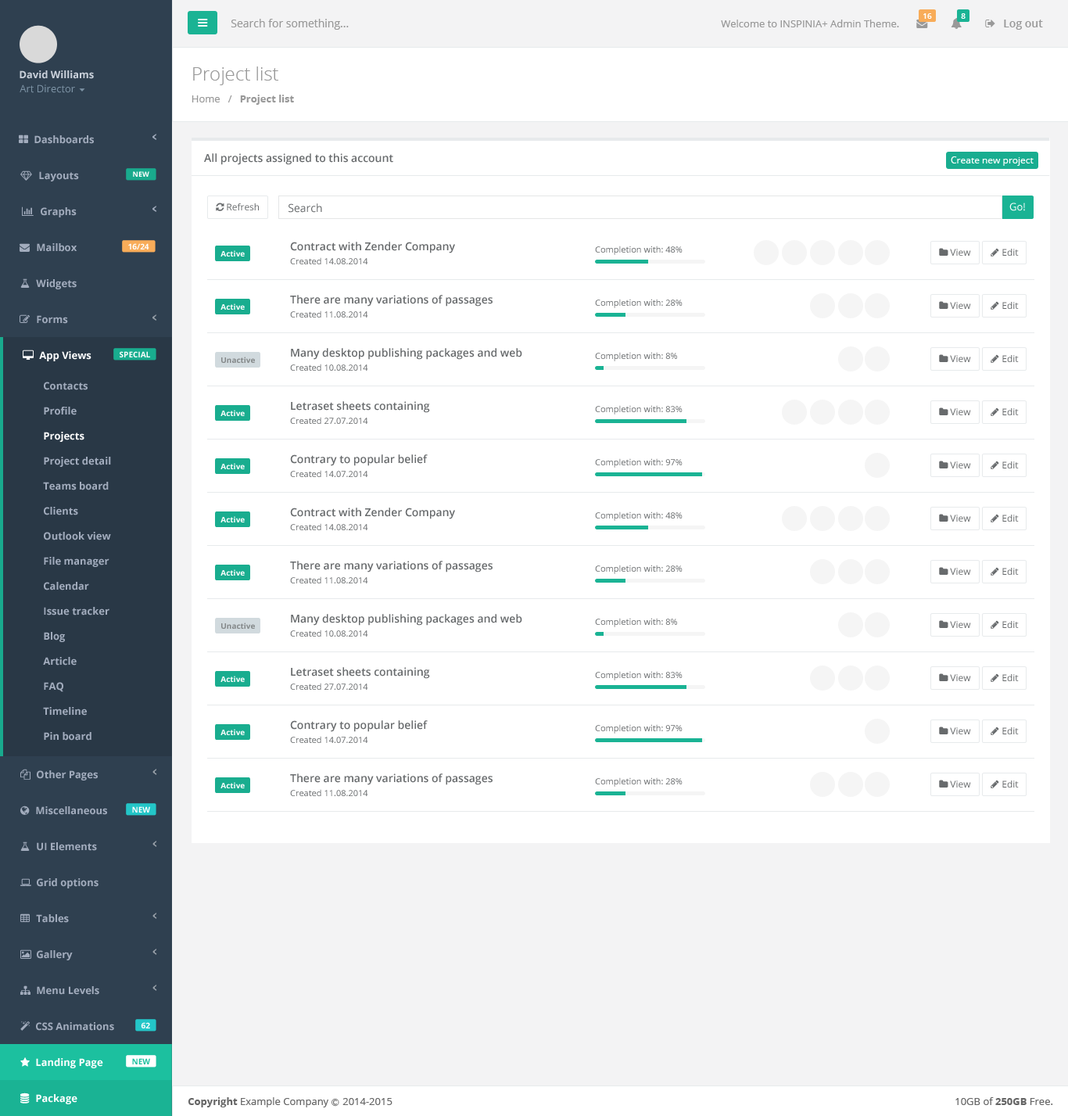
<style>
.page{position:relative;width:1068px;height:1116px;background:#ffffff}
.page>*{position:absolute;margin:0}
.t1{font:7.8px "OpenSans-Semibold";color:#ffffff}
.t2{font:11px "OpenSans";color:#999999}
.t3{font:10.2px "OpenSans";color:#999999}
.t4{font:11px "OpenSans-Semibold";color:#999999}
.t5{font:10.2px "OpenSans-Bold";color:#cad1db}
.t6{font:18.8px "OpenSans-Light";color:#999999}
.t7{font:10.2px "OpenSans";color:#7d93a5}
.t8{font:10.2px "OpenSans-Bold";color:#999999}
.t9{font:10.2px "OpenSans-Bold";color:#a2acbd}
.t10{font:11px "OpenSans-Semibold";color:#676a6c}
.t11{font:9.4px "OpenSans";color:#ffffff}
.t12{font:7px "OpenSans-Bold";color:#fefefe}
.t13{font:9.4px "OpenSans";color:#676a6c}
.t14{font:11px "OpenSans";color:#676a6c}
.t15{font:10.2px "OpenSans";color:#ffffff}
.t16{font:7.8px "OpenSans-Bold";color:#fefefe}
.t17{font:8.6px "OpenSans";color:#676a6c}
.t18{font:7.7px "OpenSans-Bold";color:#fefefe}
.t19{font:10.2px "OpenSans-Bold";color:#ffffff}
.t20{font:7.7px "OpenSans-Bold";color:#848788}
.t21{font:7.8px "OpenSans-Bold";color:#1cc09f}
.t22{font:10.2px "OpenSans";color:#666666}
.t23{font:10.2px "OpenSans-Bold";color:#666666}
.t24{font:7.8px "Meiryo";color:#666666}
</style>
<div class="page">
<p class="t1" style="left:924px;top:13px;width:8px;height:6px">16</p>
<p class="t1" style="left:961px;top:13px;width:5px;height:6px">8</p>
<p class="t2" style="left:231px;top:19px;width:118px;height:11px">Search for something...</p>
<p class="t3" style="left:721px;top:20px;width:178px;height:7px">Welcome to INSPINIA+ Admin Theme.</p>
<p class="t4" style="left:1004px;top:20px;width:39px;height:10px">Log out</p>
<p class="t5" style="left:20px;top:70px;width:74px;height:9px">David Williams</p>
<p class="t6" style="left:193px;top:66px;width:85px;height:19px">Project list</p>
<p class="t7" style="left:20px;top:84px;width:55px;height:9px">Art Director</p>
<p class="t8" style="left:192px;top:95px;width:102px;height:10px"><span class="t3">Home   /   </span>Project list</p>
<p class="t9" style="left:34px;top:135px;width:60px;height:9px">Dashboards</p>
<p class="t10" style="left:204px;top:153px;width:189px;height:12px">All projects assigned to this account</p>
<p class="t11" style="left:951px;top:156px;width:83px;height:10px">Create new project</p>
<p class="t9" style="left:39px;top:171px;width:40px;height:10px">Layouts</p>
<p class="t12" style="left:133px;top:171px;width:16px;height:6px">NEW</p>
<p class="t9" style="left:41px;top:207px;width:36px;height:10px">Graphs</p>
<p class="t13" style="left:227px;top:203px;width:32px;height:7px">Refresh</p>
<p class="t14" style="left:289px;top:203px;width:33px;height:10px">Search</p>
<p class="t15" style="left:1010px;top:203px;width:15px;height:8px">Go!</p>
<p class="t9" style="left:37px;top:243px;width:40px;height:9px">Mailbox</p>
<p class="t16" style="left:128px;top:243px;width:21px;height:6px">16/24</p>
<p class="t10" style="left:290px;top:242px;width:165px;height:11px">Contract with Zender Company</p>
<p class="t17" style="left:595px;top:246px;width:88px;height:9px">Completion with: 48%</p>
<p class="t18" style="left:221px;top:250px;width:24px;height:7px">Active</p>
<p class="t17" style="left:290px;top:257px;width:78px;height:7px">Created 14.08.2014</p>
<p class="t13" style="left:950px;top:249px;width:21px;height:7px">View</p>
<p class="t13" style="left:1003px;top:249px;width:16px;height:7px">Edit</p>
<p class="t9" style="left:36px;top:279px;width:41px;height:10px">Widgets</p>
<p class="t18" style="left:221px;top:303px;width:24px;height:7px">Active</p>
<p class="t10" style="left:290px;top:295px;width:203px;height:12px">There are many variations of passages</p>
<p class="t17" style="left:595px;top:299px;width:88px;height:9px">Completion with: 28%</p>
<p class="t13" style="left:950px;top:302px;width:21px;height:7px">View</p>
<p class="t13" style="left:1003px;top:302px;width:16px;height:7px">Edit</p>
<p class="t9" style="left:37px;top:315px;width:31px;height:9px">Forms</p>
<p class="t17" style="left:290px;top:311px;width:78px;height:7px">Created 11.08.2014</p>
<p class="t19" style="left:39px;top:351px;width:53px;height:10px">App Views</p>
<p class="t16" style="left:120px;top:351px;width:30px;height:6px">SPECIAL</p>
<p class="t10" style="left:291px;top:348px;width:231px;height:12px">Many desktop publishing packages and web</p>
<p class="t17" style="left:595px;top:352px;width:82px;height:9px">Completion with: 8%</p>
<p class="t20" style="left:221px;top:357px;width:34px;height:6px">Unactive</p>
<p class="t17" style="left:290px;top:364px;width:78px;height:7px">Created 10.08.2014</p>
<p class="t13" style="left:950px;top:355px;width:21px;height:7px">View</p>
<p class="t13" style="left:1003px;top:355px;width:16px;height:7px">Edit</p>
<p class="t9" style="left:44px;top:382px;width:44px;height:8px">Contacts</p>
<p class="t10" style="left:291px;top:401px;width:139px;height:12px">Letraset sheets containing</p>
<p class="t9" style="left:44px;top:407px;width:33px;height:8px">Profile</p>
<p class="t18" style="left:221px;top:410px;width:24px;height:6px">Active</p>
<p class="t17" style="left:595px;top:405px;width:88px;height:10px">Completion with: 83%</p>
<p class="t13" style="left:950px;top:408px;width:21px;height:7px">View</p>
<p class="t13" style="left:1003px;top:408px;width:16px;height:7px">Edit</p>
<p class="t17" style="left:290px;top:417px;width:78px;height:7px">Created 27.07.2014</p>
<p class="t19" style="left:44px;top:432px;width:40px;height:10px">Projects</p>
<p class="t9" style="left:44px;top:457px;width:67px;height:10px">Project detail</p>
<p class="t10" style="left:290px;top:454px;width:138px;height:12px">Contrary to popular belief</p>
<p class="t17" style="left:595px;top:458px;width:88px;height:10px">Completion with: 97%</p>
<p class="t13" style="left:950px;top:461px;width:21px;height:7px">View</p>
<p class="t13" style="left:1003px;top:461px;width:16px;height:7px">Edit</p>
<p class="t18" style="left:221px;top:463px;width:24px;height:6px">Active</p>
<p class="t17" style="left:290px;top:470px;width:78px;height:7px">Created 14.07.2014</p>
<p class="t9" style="left:43px;top:482px;width:66px;height:8px">Teams board</p>
<p class="t9" style="left:44px;top:507px;width:34px;height:8px">Clients</p>
<p class="t10" style="left:290px;top:508px;width:165px;height:11px">Contract with Zender Company</p>
<p class="t18" style="left:221px;top:516px;width:24px;height:6px">Active</p>
<p class="t17" style="left:595px;top:512px;width:88px;height:9px">Completion with: 48%</p>
<p class="t13" style="left:950px;top:515px;width:21px;height:7px">View</p>
<p class="t13" style="left:1003px;top:515px;width:16px;height:7px">Edit</p>
<p class="t9" style="left:44px;top:532px;width:67px;height:8px">Outlook view</p>
<p class="t17" style="left:290px;top:523px;width:78px;height:7px">Created 14.08.2014</p>
<p class="t9" style="left:44px;top:557px;width:65px;height:10px">File manager</p>
<p class="t18" style="left:221px;top:569px;width:24px;height:7px">Active</p>
<p class="t10" style="left:290px;top:561px;width:203px;height:12px">There are many variations of passages</p>
<p class="t17" style="left:595px;top:565px;width:88px;height:9px">Completion with: 28%</p>
<p class="t13" style="left:950px;top:568px;width:21px;height:7px">View</p>
<p class="t13" style="left:1003px;top:568px;width:16px;height:7px">Edit</p>
<p class="t9" style="left:44px;top:582px;width:45px;height:9px">Calendar</p>
<p class="t17" style="left:290px;top:576px;width:78px;height:7px">Created 11.08.2014</p>
<p class="t9" style="left:44px;top:607px;width:65px;height:9px">Issue tracker</p>
<p class="t10" style="left:291px;top:614px;width:231px;height:12px">Many desktop publishing packages and web</p>
<p class="t17" style="left:595px;top:618px;width:82px;height:9px">Completion with: 8%</p>
<p class="t20" style="left:221px;top:623px;width:34px;height:6px">Unactive</p>
<p class="t17" style="left:290px;top:630px;width:78px;height:7px">Created 10.08.2014</p>
<p class="t13" style="left:950px;top:621px;width:21px;height:7px">View</p>
<p class="t13" style="left:1003px;top:621px;width:16px;height:7px">Edit</p>
<p class="t9" style="left:44px;top:632px;width:21px;height:10px">Blog</p>
<p class="t9" style="left:43px;top:657px;width:34px;height:9px">Article</p>
<p class="t18" style="left:221px;top:676px;width:24px;height:6px">Active</p>
<p class="t10" style="left:291px;top:667px;width:139px;height:12px">Letraset sheets containing</p>
<p class="t17" style="left:595px;top:671px;width:88px;height:9px">Completion with: 83%</p>
<p class="t13" style="left:950px;top:674px;width:21px;height:7px">View</p>
<p class="t13" style="left:1003px;top:674px;width:16px;height:7px">Edit</p>
<p class="t9" style="left:44px;top:682px;width:19px;height:10px">FAQ</p>
<p class="t17" style="left:290px;top:683px;width:78px;height:7px">Created 27.07.2014</p>
<p class="t9" style="left:43px;top:707px;width:44px;height:9px">Timeline</p>
<p class="t10" style="left:290px;top:720px;width:138px;height:12px">Contrary to popular belief</p>
<p class="t17" style="left:595px;top:724px;width:88px;height:10px">Completion with: 97%</p>
<p class="t9" style="left:44px;top:732px;width:48px;height:9px">Pin board</p>
<p class="t18" style="left:221px;top:729px;width:24px;height:6px">Active</p>
<p class="t17" style="left:290px;top:736px;width:78px;height:7px">Created 14.07.2014</p>
<p class="t13" style="left:950px;top:727px;width:21px;height:7px">View</p>
<p class="t13" style="left:1003px;top:727px;width:16px;height:7px">Edit</p>
<p class="t9" style="left:37px;top:770px;width:61px;height:11px">Other Pages</p>
<p class="t10" style="left:290px;top:774px;width:203px;height:11px">There are many variations of passages</p>
<p class="t18" style="left:221px;top:782px;width:24px;height:6px">Active</p>
<p class="t17" style="left:595px;top:777px;width:88px;height:10px">Completion with: 28%</p>
<p class="t13" style="left:950px;top:781px;width:21px;height:7px">View</p>
<p class="t13" style="left:1003px;top:781px;width:16px;height:7px">Edit</p>
<p class="t17" style="left:290px;top:789px;width:78px;height:7px">Created 11.08.2014</p>
<p class="t9" style="left:36px;top:806px;width:71px;height:9px">Miscellaneous</p>
<p class="t16" style="left:132px;top:806px;width:18px;height:7px">NEW</p>
<p class="t9" style="left:37px;top:842px;width:60px;height:9px">UI Elements</p>
<p class="t9" style="left:37px;top:878px;width:62px;height:11px">Grid options</p>
<p class="t9" style="left:36px;top:914px;width:33px;height:9px">Tables</p>
<p class="t9" style="left:37px;top:950px;width:36px;height:10px">Gallery</p>
<p class="t9" style="left:37px;top:986px;width:62px;height:9px">Menu Levels</p>
<p class="t9" style="left:36px;top:1022px;width:78px;height:9px">CSS Animations</p>
<p class="t16" style="left:141px;top:1022px;width:9px;height:7px">62</p>
<p class="t19" style="left:36px;top:1058px;width:67px;height:10px">Landing Page</p>
<p class="t21" style="left:132px;top:1058px;width:18px;height:6px">NEW</p>
<p class="t19" style="left:36px;top:1094px;width:41px;height:10px">Package</p>
<p class="t22" style="left:188px;top:1097px;width:205px;height:10px"><span class="t23">Copyright</span> Example Company <span class="t24">Ⓒ </span>2014-2015</p>
<p class="t22" style="left:956px;top:1097px;width:98px;height:8px">10GB of <span class="t23">250GB</span> Free.</p>
</div>
